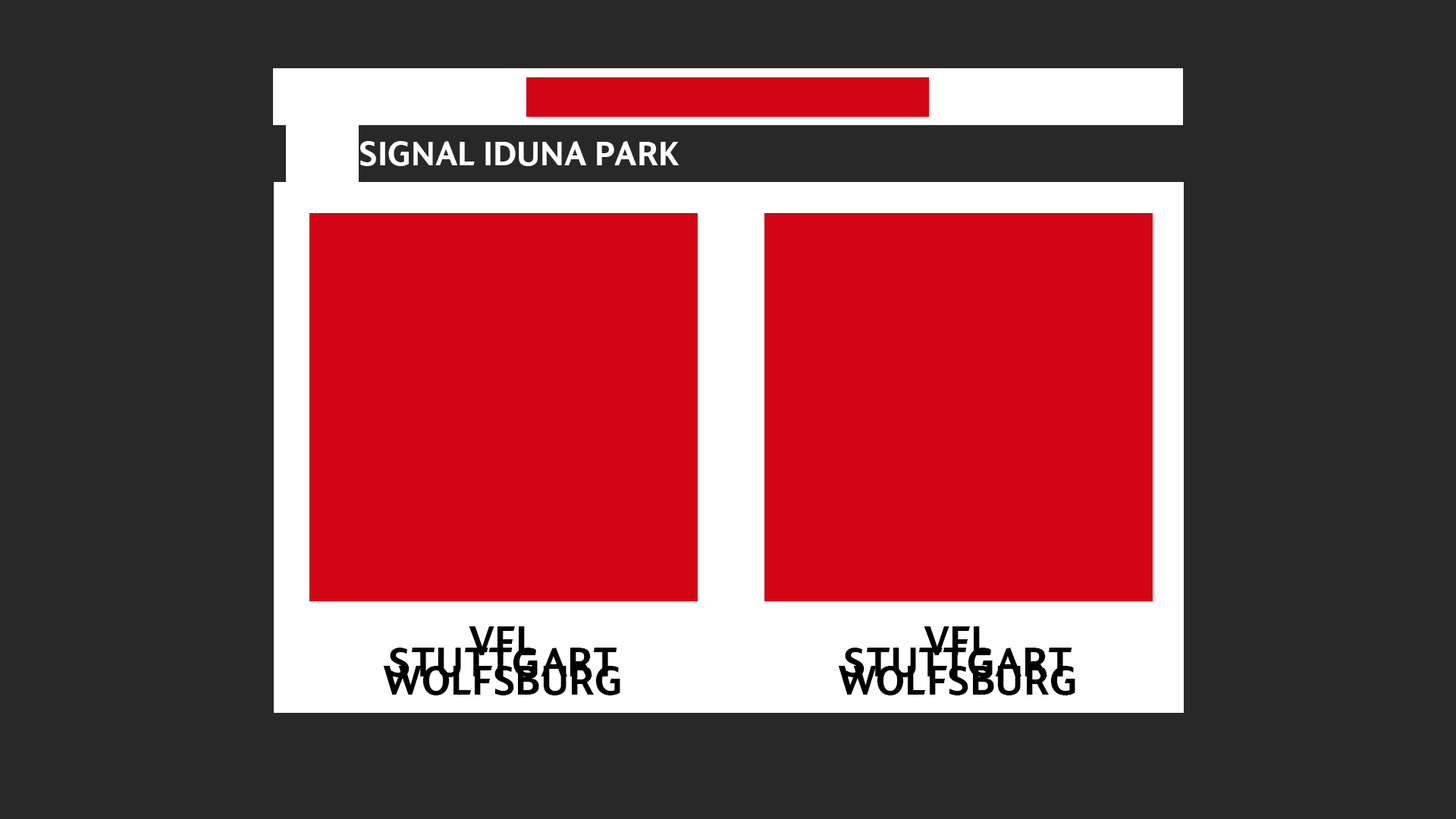
<style>
.page{position:relative;width:1456px;height:819px;background:#282828}
.page>*{position:absolute;margin:0}
.t1{font:37.9px "Champions-Bold";color:#ffffff;text-transform:uppercase}
.t2{font:45.5px/39.4px "Champions-Bold";color:#000000;text-transform:uppercase}
.t3{font:45.5px "Champions-Bold";color:#000000;text-transform:uppercase}
</style>
<div class="page">
<p class="t1" style="left:360px;top:141px;width:319px;height:25px">Signal Iduna Park</p>
<p class="t2" style="left:383px;top:626px;width:237px;height:69px;text-align:center">Vfl<br>Wolfsburg</p>
<p class="t2" style="left:383px;top:626px;width:237px;height:69px;text-align:center">Vfl<br>Wolfsburg</p>
<p class="t2" style="left:838px;top:626px;width:237px;height:69px;text-align:center">Vfl<br>Wolfsburg</p>
<p class="t2" style="left:838px;top:626px;width:237px;height:69px;text-align:center">Vfl<br>Wolfsburg</p>
<p class="t3" style="left:390px;top:648px;width:227px;height:29px">Stuttgart</p>
<p class="t3" style="left:390px;top:648px;width:227px;height:29px">Stuttgart</p>
<p class="t3" style="left:845px;top:648px;width:227px;height:29px">Stuttgart</p>
<p class="t3" style="left:845px;top:648px;width:227px;height:29px">Stuttgart</p>
</div>
